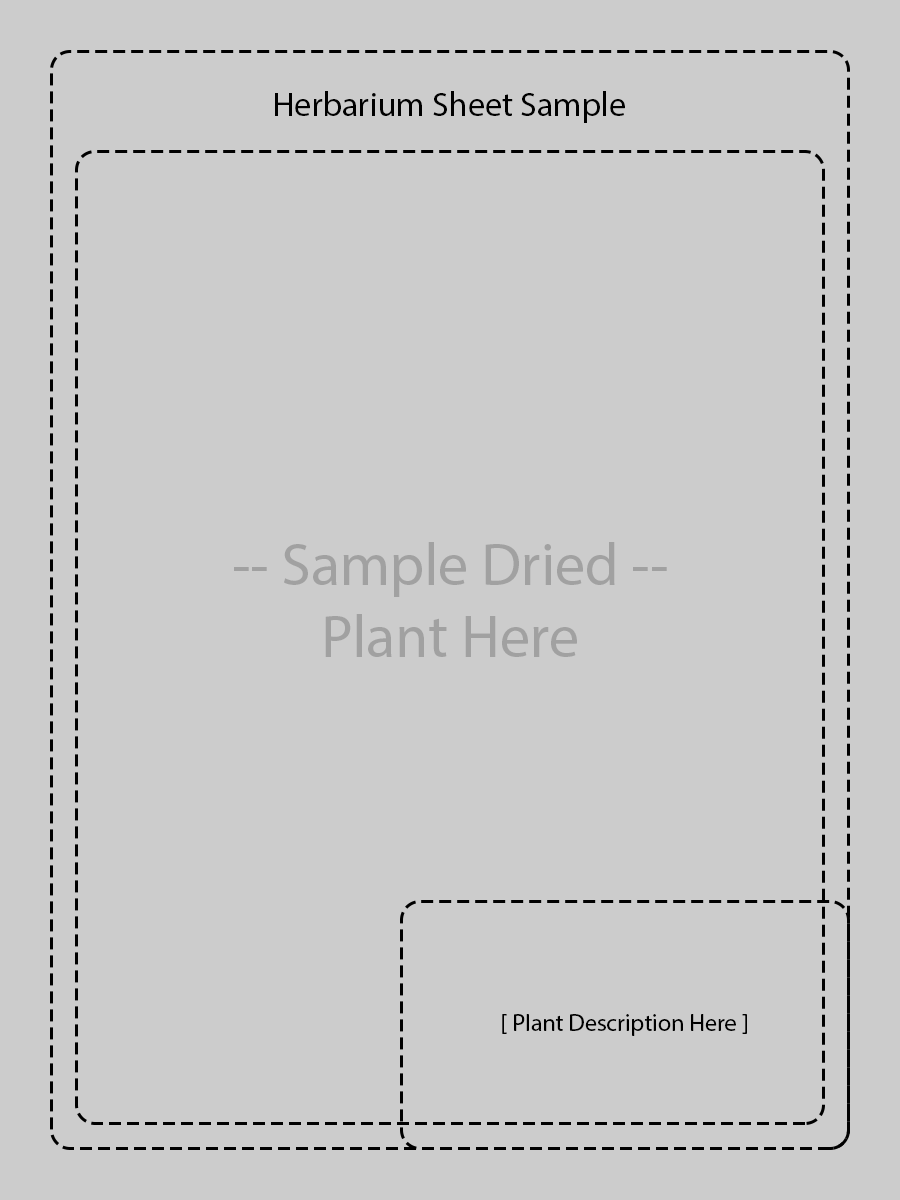
<style>
.page{position:relative;width:900px;height:1200px;background:#cccccc}
.page>*{position:absolute;margin:0}
.t1{font:34px "MyriadPro-Regular";color:#000000}
.t2{font:60px "MyriadPro-Regular";color:#a1a1a1}
.t3{font:24px "MyriadPro-Regular";color:#000000}
</style>
<div class="page">
<p class="t1" style="left:275px;top:91px;width:350px;height:32px">Herbarium Sheet Sample</p>
<p class="t2" style="left:234px;top:542px;width:433px;height:115px;text-align:center">-- Sample Dried --<br>Plant Here</p>
<p class="t3" style="left:502px;top:1014px;width:245px;height:22px">[ Plant Description Here ]</p>
</div>
